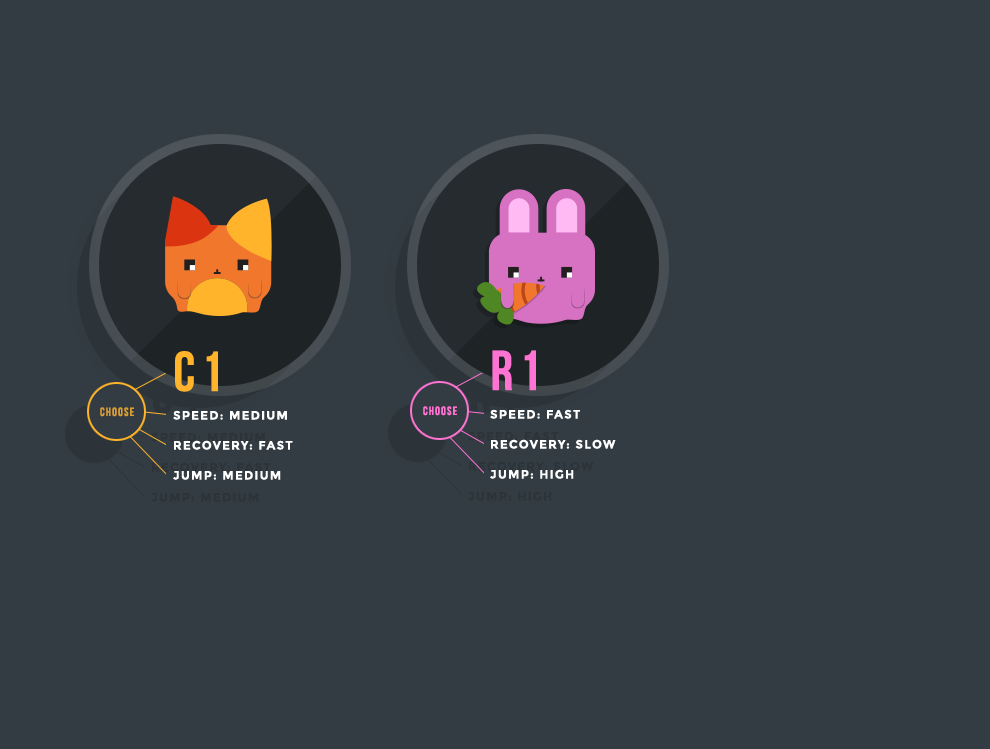
<style>
.page{position:relative;width:990px;height:749px;background:#333c42}
.page>*{position:absolute;margin:0}
.t1{font:56.3px "BebasNeueBold";letter-spacing:0.1em;color:#ffb42b;text-transform:uppercase}
.t2{font:56.3px "BebasNeueBold";letter-spacing:0.1em;color:#ff73d3;text-transform:uppercase}
.t3{font:12px "BebasNeueBold";letter-spacing:0.1em;color:#d99e30;text-transform:uppercase}
.t4{font:12px/30px "Montserrat-Bold";letter-spacing:0.1em;color:#ffffff;text-transform:uppercase}
.t5{font:12px "BebasNeueBold";letter-spacing:0.1em;color:#ff73d3;text-transform:uppercase}
</style>
<div class="page">
<p class="t1" style="left:175px;top:351px;width:43px;height:41px">C1</p>
<p class="t2" style="left:492px;top:350px;width:44px;height:41px">R1</p>
<p class="t3" style="left:100px;top:407px;width:34px;height:10px">CHOOSE</p>
<p class="t4" style="left:173px;top:410px;width:120px;height:70px">SPEED: MEDIUM<br>RECOVERY: FAST<br>JUMP: MEDIUM</p>
<p class="t5" style="left:423px;top:406px;width:34px;height:10px">CHOOSE</p>
<p class="t4" style="left:490px;top:409px;width:126px;height:70px">SPEED: FAST<br>RECOVERY: SLOW<br>JUMP: HIGH</p>
</div>
